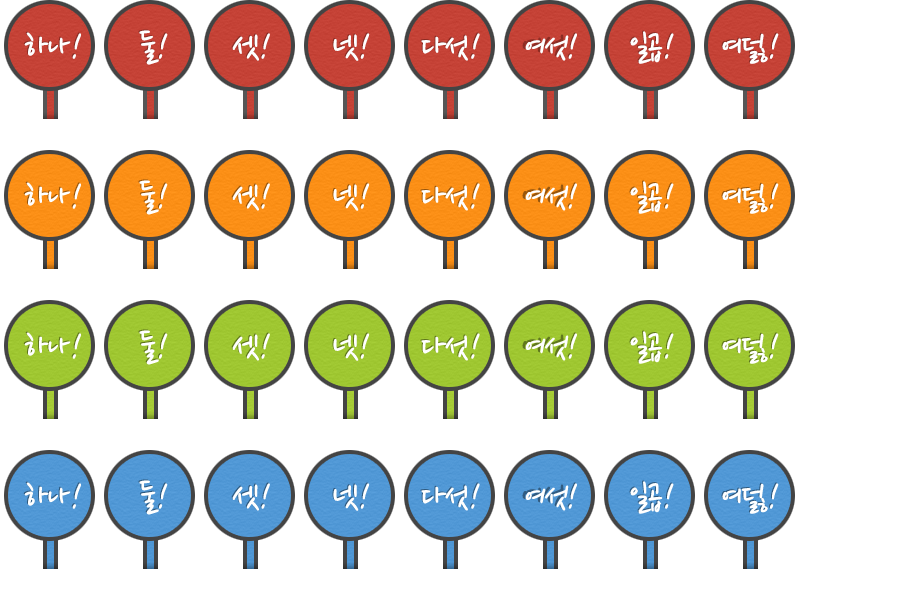
<style>
.page{position:relative;width:922px;height:600px;background:#ffffff}
.page>*{position:absolute;margin:0}
.t1{font:37px "NanumPen";letter-spacing:-0.03em}
.t2{font:37px "NanumPen";letter-spacing:-0.03em;font-style:italic}
.t3{font:37px "NanumPen";letter-spacing:-0.03em;color:#ffffff}
.t4{font:37px "NanumPen";letter-spacing:-0.03em;color:#ffffff;font-style:italic}
</style>
<div class="page">
<p class="t1" style="left:138px;top:29px;width:29px;height:35px">둘<span class="t2">!</span></p>
<p class="t3" style="left:139px;top:30px;width:29px;height:35px">둘<span class="t4">!</span></p>
<p class="t1" style="left:629px;top:30px;width:44px;height:33px">일곱<span class="t2">!</span></p>
<p class="t1" style="left:23px;top:31px;width:57px;height:27px">하나<span class="t2">!</span></p>
<p class="t3" style="left:24px;top:32px;width:57px;height:27px">하나<span class="t4">!</span></p>
<p class="t1" style="left:231px;top:32px;width:38px;height:28px">셋<span class="t2">!</span></p>
<p class="t3" style="left:232px;top:33px;width:38px;height:28px">셋<span class="t4">!</span></p>
<p class="t1" style="left:332px;top:32px;width:37px;height:28px">넷<span class="t2">!</span></p>
<p class="t3" style="left:333px;top:33px;width:37px;height:28px">넷<span class="t4">!</span></p>
<p class="t1" style="left:420px;top:32px;width:59px;height:28px">다섯<span class="t2">!</span></p>
<p class="t3" style="left:421px;top:33px;width:59px;height:28px">다섯<span class="t4">!</span></p>
<p class="t4" style="left:525px;top:33px;width:52px;height:28px">여섯!</p>
<p class="t3" style="left:630px;top:31px;width:44px;height:33px">일곱<span class="t4">!</span></p>
<p class="t1" style="left:721px;top:32px;width:57px;height:31px">여덣<span class="t2">!</span></p>
<p class="t3" style="left:722px;top:33px;width:57px;height:31px">여덣<span class="t4">!</span></p>
</div>
